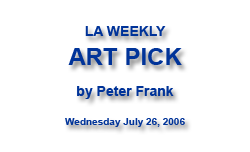
<style>
.page{position:relative;width:250px;height:152px;background:#ffffff}
.page>*{position:absolute;margin:0}
.t1{font:10px "Arial-BoldMT";color:#003399}
.t2{font:14px "Arial-BoldMT";color:#003399}
.t3{font:24px "Arial-BoldMT";color:#003399}
</style>
<div class="page">
<p class="t1" style="left:65px;top:26px;width:120px;height:101px;text-align:center"><span class="t2">LA WEEKLY<br></span><span class="t3">ART PICK<br><br></span><span class="t2">by Peter Frank<br><br></span>Wednesday July 26, 2006</p>
</div>
